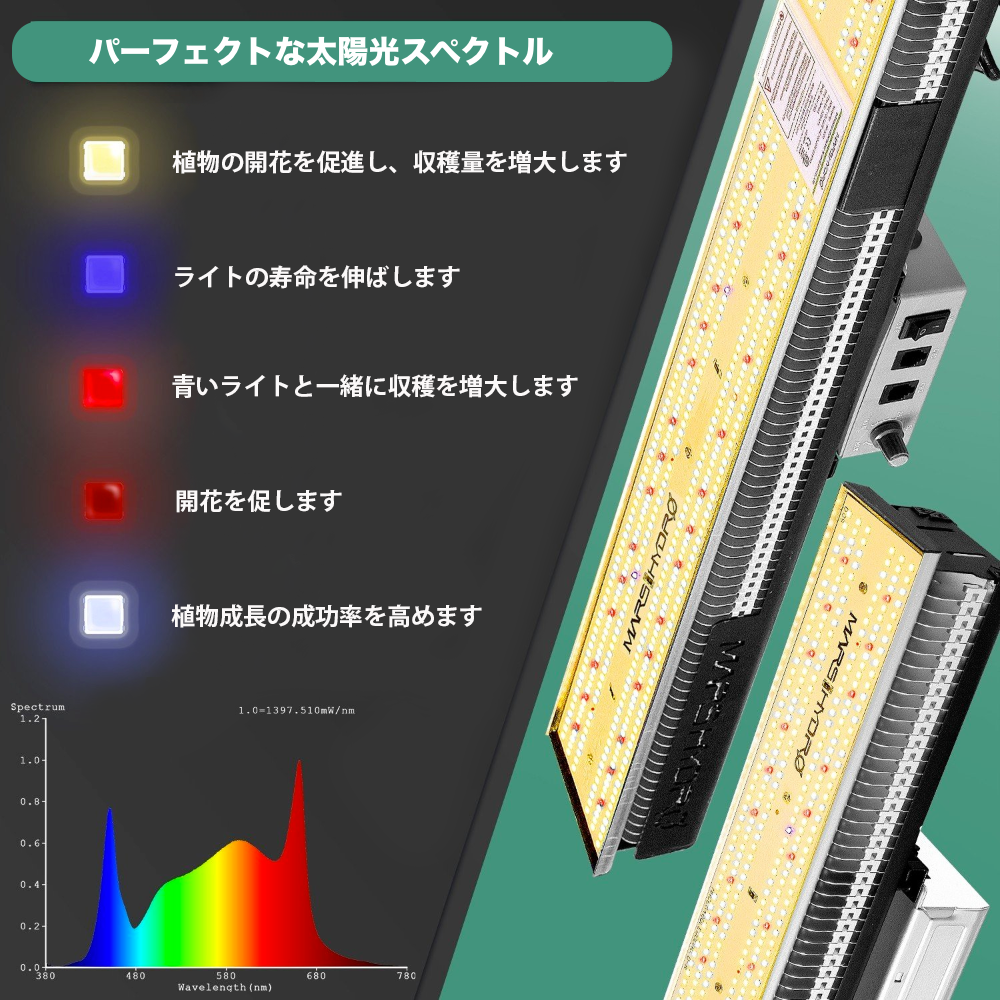
<style>
.page{position:relative;width:1000px;height:1000px;background:#343434}
.page>*{position:absolute;margin:0}
.t1{font:24px "KozGoPr6N-Bold";color:#fbf9f9}
</style>
<div class="page">
<p class="t1" style="left:172px;top:150px;width:455px;height:24px">植物の開花を促進し、収穫量を増大します</p>
<p class="t1" style="left:175px;top:265px;width:285px;height:24px">ライトの寿命を伸ばします</p>
<p class="t1" style="left:172px;top:374px;width:406px;height:24px">青いライトと一緒に収穫を増大します</p>
<p class="t1" style="left:176px;top:489px;width:166px;height:24px">開花を促します</p>
<p class="t1" style="left:171px;top:604px;width:311px;height:24px">植物成長の成功率を高めます</p>
</div>
